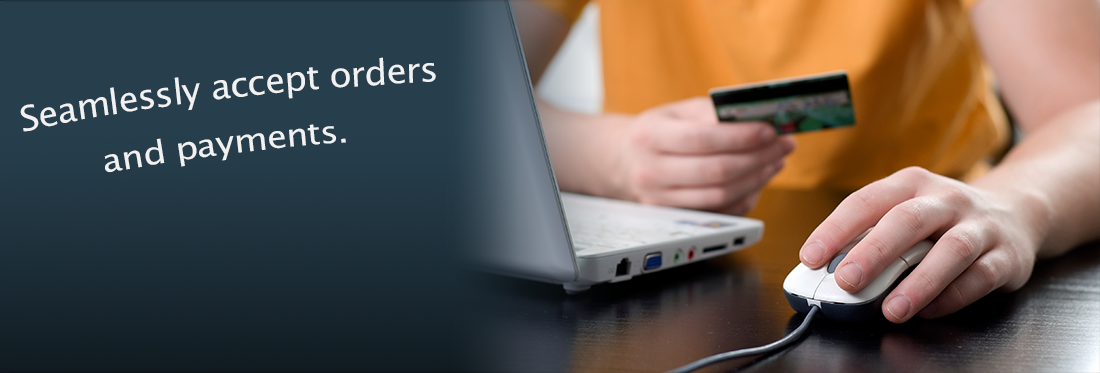
<style>
.page{position:relative;width:1100px;height:373px}
.page>*{position:absolute;margin:0}
.t1{font:34.9px "LucidaSansUnicode";letter-spacing:-0.025em;color:#f1f1f1;scale:1.04 1}
.t2{font:31.9px "LucidaSansUnicode";letter-spacing:-0.025em;color:#f1f1f1;scale:1.13 1}
</style>
<div class="page">
<p class="t1" style="left:20px;top:57px;width:416px;height:75px;rotate:2deg">Seamlessly accept orders</p>
<p class="t2" style="left:104px;top:124px;width:242px;height:49px;rotate:3deg">and payments.</p>
</div>
